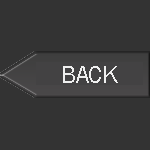
<style>
.page{position:relative;width:150px;height:150px;background:#333333}
.page>*{position:absolute;margin:0}
.t1{font:25px "FranklinGothic-Book";letter-spacing:0.005em;color:#efefef}
</style>
<div class="page">
<p class="t1" style="left:63px;top:66px;width:55px;height:17px">BACK</p>
</div>
